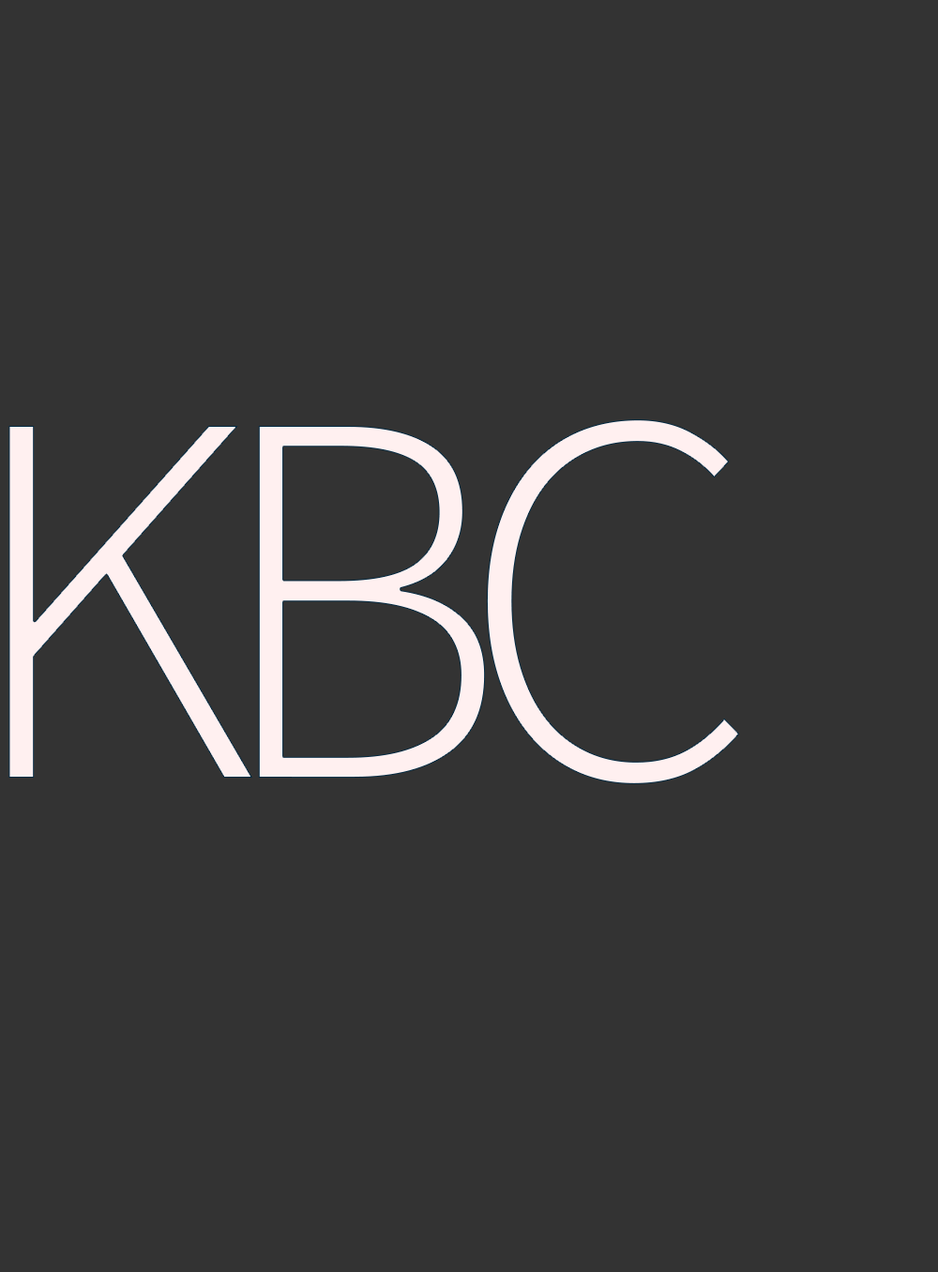
<style>
.page{position:relative;width:938px;height:1272px;background:#333333}
.page>*{position:absolute;margin:0}
.t1{font:533.6px "SourceCodePro-Light";letter-spacing:-0.13em;color:#fff0f0}
</style>
<div class="page">
<p class="t1" style="left:8px;top:419px;width:732px;height:365px">KBC</p>
</div>
